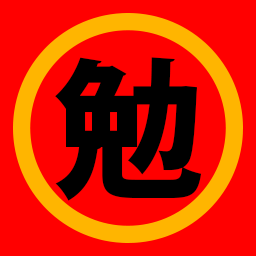
<style>
.page{position:relative;width:256px;height:256px;background:#ff0000}
.page>*{position:absolute;margin:0}
.t1{font:150px "KozGoPro-Heavy";color:#000000}
</style>
<div class="page">
<p class="t1" style="left:55px;top:57px;width:147px;height:144px">勉</p>
</div>
